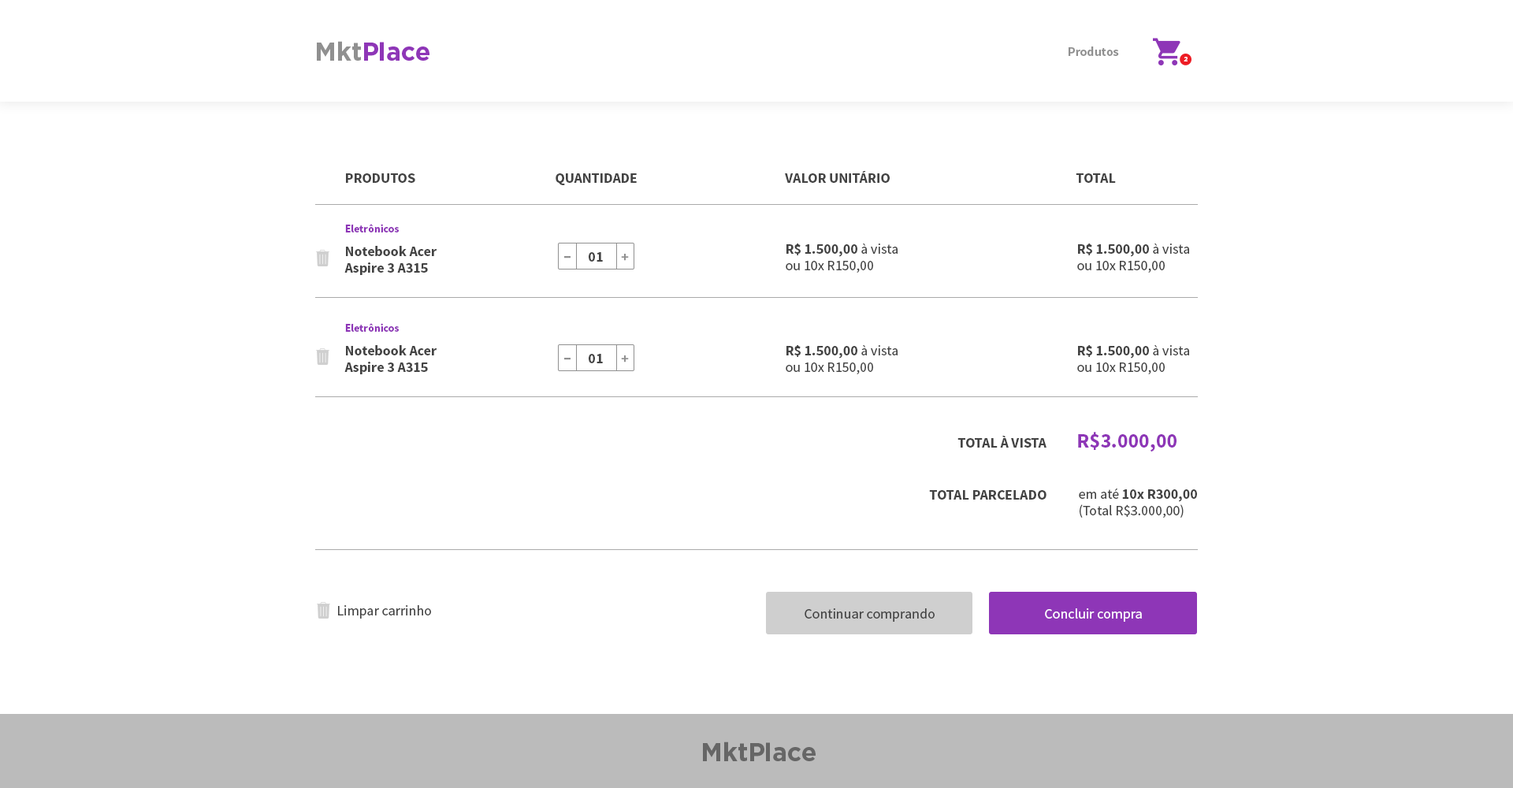
<style>
.page{position:relative;width:1513px;height:788px;background:#ffffff}
.page>*{position:absolute;margin:0}
.t1{font:12.6px "SourceSansPro-Bold";color:#909090}
.t2{font:6.3px "Gotham-Bold";color:#ffffff}
.t3{font:14.2px "SourceSansPro-Bold";color:#434343}
.t4{font:11px "SourceSansPro-Bold";color:#8e36b7}
.t5{font:14.2px "SourceSansPro-Regular";color:#434343}
.t6{font:17.5px "SourceSansPro-Bold";color:#909090;text-transform:uppercase;scale:1.47 1}
.t7{font:14.3px "SourceSansPro-Bold";color:#434343}
.t8{font:14.2px "SourceSansPro-Bold";color:#909090;text-transform:uppercase}
.t9{font:20.5px "SourceSansPro-Bold";color:#8e36b7}
.t10{font:14.2px "SourceSansPro-Regular";color:#ffffff}
</style>
<div class="page">
<p class="t1" style="left:1069px;top:46px;width:50px;height:10px">Produtos</p>
<p class="t2" style="left:1184px;top:57px;width:4px;height:4px">2</p>
<p class="t3" style="left:346px;top:173px;width:69px;height:10px">PRODUTOS</p>
<p class="t3" style="left:556px;top:173px;width:81px;height:12px">QUANTIDADE</p>
<p class="t3" style="left:785px;top:171px;width:105px;height:12px">VALOR UNITÁRIO</p>
<p class="t3" style="left:1076px;top:173px;width:40px;height:10px">TOTAL</p>
<p class="t4" style="left:345px;top:224px;width:54px;height:8px">Eletrônicos</p>
<p class="t3" style="left:344px;top:246px;width:93px;height:29px">Notebook Acer <br>Aspire 3 A315</p>
<p class="t5" style="left:786px;top:244px;width:112px;height:29px"><span class="t3">R$ 1.500,00</span> à vista<br>ou 10x R150,00</p>
<p class="t5" style="left:1077px;top:244px;width:112px;height:29px"><span class="t3">R$ 1.500,00</span> à vista<br>ou 10x R150,00</p>
<p class="t6" style="left:564px;top:256px;width:7px;height:2px">-</p>
<p class="t7" style="left:589px;top:252px;width:14px;height:10px">01</p>
<p class="t8" style="left:621px;top:254px;width:8px;height:7px">+</p>
<p class="t4" style="left:345px;top:323px;width:54px;height:9px">Eletrônicos</p>
<p class="t3" style="left:344px;top:345px;width:93px;height:29px">Notebook Acer <br>Aspire 3 A315</p>
<p class="t7" style="left:589px;top:354px;width:14px;height:9px">01</p>
<p class="t5" style="left:786px;top:345px;width:112px;height:29px"><span class="t3">R$ 1.500,00</span> à vista<br>ou 10x R150,00</p>
<p class="t5" style="left:1077px;top:345px;width:112px;height:29px"><span class="t3">R$ 1.500,00</span> à vista<br>ou 10x R150,00</p>
<p class="t6" style="left:564px;top:358px;width:7px;height:2px">-</p>
<p class="t8" style="left:621px;top:355px;width:8px;height:8px">+</p>
<p class="t3" style="left:958px;top:436px;width:89px;height:12px">TOTAL À VISTA</p>
<p class="t9" style="left:1078px;top:432px;width:99px;height:20px">R$3.000,00</p>
<p class="t3" style="left:929px;top:490px;width:118px;height:10px">TOTAL PARCELADO</p>
<p class="t5" style="left:1079px;top:489px;width:118px;height:29px">em até <span class="t3">10x R300,00<br></span>(Total R$3.000,00)</p>
<p class="t5" style="left:338px;top:605px;width:93px;height:14px">Limpar carrinho</p>
<p class="t5" style="left:805px;top:608px;width:130px;height:14px">Continuar comprando</p>
<p class="t10" style="left:1045px;top:608px;width:97px;height:14px">Concluir compra</p>
</div>
